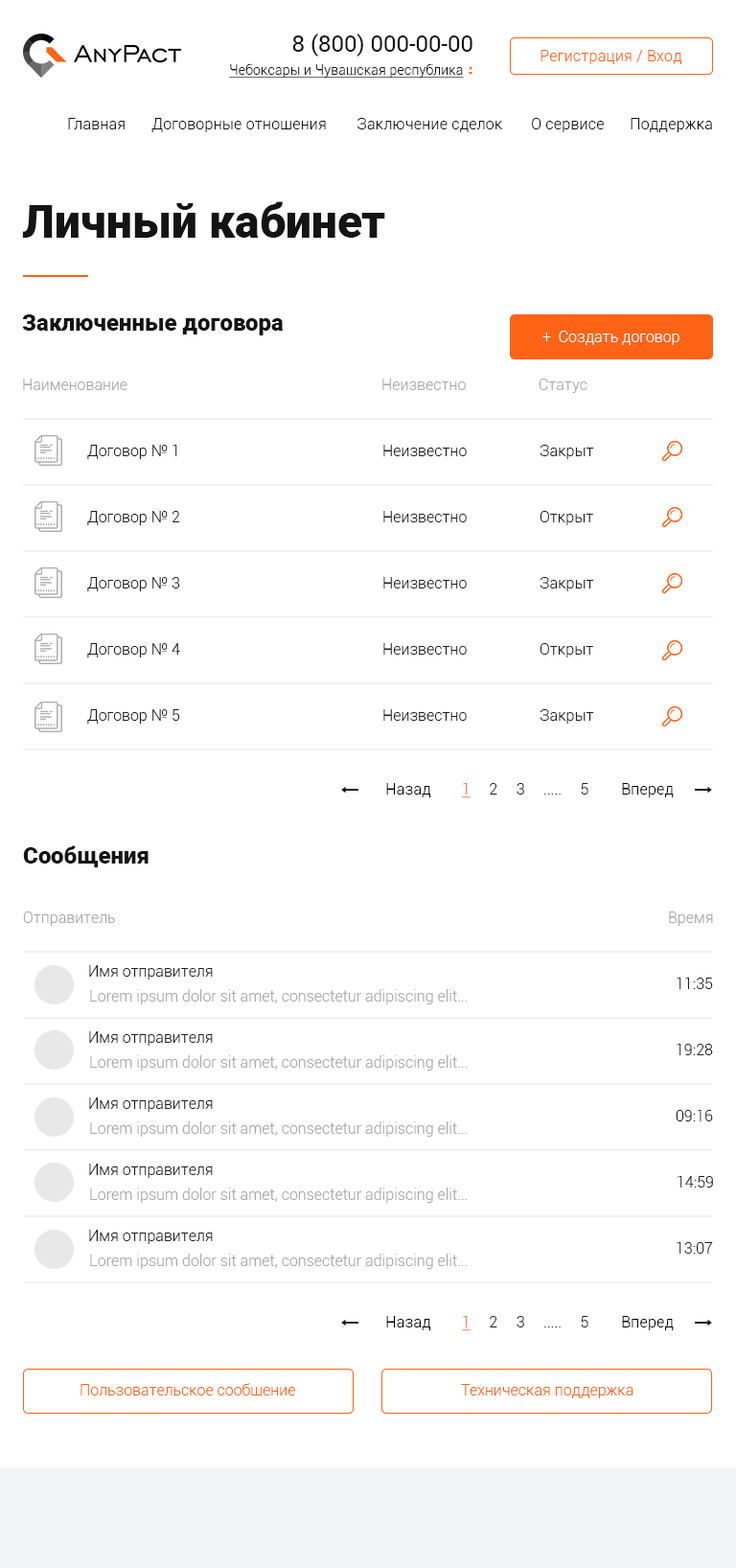
<style>
.page{position:relative;width:736px;height:1568px;background:#ffffff}
.page>*{position:absolute;margin:0}
.t1{font:23px "Roboto-Regular";color:#141414}
.t2{font:15.3px "Roboto-Light";letter-spacing:0.015em;color:#ff6416}
.t3{font:13.4px "Roboto-Light";letter-spacing:0.015em;color:#131313;text-decoration:underline}
.t4{font:15.3px "Roboto-Light";letter-spacing:0.015em;color:#141414}
.t5{font:15.3px "Roboto-Light";letter-spacing:0.015em;color:#131313}
.t6{font:46px "Roboto-Black";color:#141414}
.t7{font:23px "Roboto-Black";color:#141414}
.t8{font:15.3px "Roboto-Light";color:#ffffff}
.t9{font:15.3px "Roboto-Light";color:#a8a8a8}
.t10{font:15.3px "Roboto-Light";color:#1d1d1d}
.t11{font:15.3px "Roboto-Light";letter-spacing:0.015em;color:#000000}
.t12{font:15.3px "Roboto-Light";color:#ff6416;text-decoration:underline}
.t13{font:15.3px "Roboto-Light";color:#ff6416}
</style>
<div class="page">
<p class="t1" style="left:292px;top:34px;width:181px;height:23px">8 (800) 000-00-00</p>
<p class="t2" style="left:541px;top:50px;width:141px;height:14px">Регистрация / Вход</p>
<p class="t3" style="left:229px;top:64px;width:235px;height:14px">Чебоксары и Чувашская республика</p>
<p class="t4" style="left:68px;top:118px;width:57px;height:11px">Главная</p>
<p class="t5" style="left:151px;top:118px;width:175px;height:14px">Договорные отношения</p>
<p class="t5" style="left:357px;top:118px;width:146px;height:14px">Заключение сделок</p>
<p class="t5" style="left:532px;top:118px;width:72px;height:14px">О сервисе</p>
<p class="t5" style="left:631px;top:118px;width:81px;height:14px">Поддержка</p>
<p class="t6" style="left:22px;top:201px;width:363px;height:37px">Личный кабинет</p>
<p class="t7" style="left:22px;top:314px;width:262px;height:21px">Заключенные договора</p>
<p class="t8" style="left:542px;top:331px;width:138px;height:14px">+  Создать договор</p>
<p class="t9" style="left:23px;top:379px;width:104px;height:11px">Наименование</p>
<p class="t9" style="left:382px;top:379px;width:84px;height:11px">Неизвестно</p>
<p class="t9" style="left:539px;top:379px;width:49px;height:14px">Статус</p>
<p class="t10" style="left:87px;top:445px;width:90px;height:14px">Договор № 1</p>
<p class="t10" style="left:383px;top:445px;width:84px;height:11px">Неизвестно</p>
<p class="t10" style="left:540px;top:445px;width:54px;height:14px">Закрыт</p>
<p class="t10" style="left:87px;top:511px;width:93px;height:14px">Договор № 2</p>
<p class="t10" style="left:383px;top:511px;width:84px;height:11px">Неизвестно</p>
<p class="t10" style="left:540px;top:511px;width:53px;height:14px">Открыт</p>
<p class="t10" style="left:87px;top:577px;width:93px;height:14px">Договор № 3</p>
<p class="t10" style="left:383px;top:577px;width:84px;height:11px">Неизвестно</p>
<p class="t10" style="left:540px;top:577px;width:54px;height:14px">Закрыт</p>
<p class="t10" style="left:87px;top:643px;width:93px;height:14px">Договор № 4</p>
<p class="t10" style="left:383px;top:643px;width:84px;height:12px">Неизвестно</p>
<p class="t10" style="left:540px;top:643px;width:53px;height:14px">Открыт</p>
<p class="t10" style="left:87px;top:709px;width:93px;height:15px">Договор № 5</p>
<p class="t10" style="left:383px;top:709px;width:84px;height:12px">Неизвестно</p>
<p class="t10" style="left:540px;top:709px;width:54px;height:15px">Закрыт</p>
<p class="t11" style="left:386px;top:783px;width:45px;height:14px">Назад</p>
<p class="t10" style="left:462px;top:783px;width:126px;height:15px"><span class="t12">1</span>     2     3     .....     5</p>
<p class="t11" style="left:622px;top:783px;width:52px;height:14px">Вперед</p>
<p class="t7" style="left:23px;top:845px;width:126px;height:22px">Сообщения</p>
<p class="t9" style="left:23px;top:911px;width:92px;height:15px">Отправитель</p>
<p class="t9" style="left:669px;top:911px;width:44px;height:15px">Время</p>
<p class="t10" style="left:89px;top:965px;width:124px;height:15px">Имя отправителя</p>
<p class="t10" style="left:677px;top:978px;width:36px;height:11px">11:35</p>
<p class="t9" style="left:90px;top:989px;width:378px;height:15px">Lorem ipsum dolor sit amet, consectetur adipiscing elit...</p>
<p class="t10" style="left:89px;top:1031px;width:124px;height:15px">Имя отправителя</p>
<p class="t10" style="left:677px;top:1044px;width:36px;height:11px">19:28</p>
<p class="t9" style="left:90px;top:1055px;width:378px;height:16px">Lorem ipsum dolor sit amet, consectetur adipiscing elit...</p>
<p class="t10" style="left:89px;top:1097px;width:124px;height:15px">Имя отправителя</p>
<p class="t10" style="left:676px;top:1110px;width:37px;height:11px">09:16</p>
<p class="t9" style="left:90px;top:1121px;width:378px;height:16px">Lorem ipsum dolor sit amet, consectetur adipiscing elit...</p>
<p class="t10" style="left:89px;top:1164px;width:124px;height:14px">Имя отправителя</p>
<p class="t10" style="left:678px;top:1176px;width:35px;height:12px">14:59</p>
<p class="t9" style="left:90px;top:1188px;width:378px;height:15px">Lorem ipsum dolor sit amet, consectetur adipiscing elit...</p>
<p class="t10" style="left:89px;top:1230px;width:124px;height:14px">Имя отправителя</p>
<p class="t9" style="left:90px;top:1254px;width:378px;height:15px">Lorem ipsum dolor sit amet, consectetur adipiscing elit...</p>
<p class="t10" style="left:677px;top:1242px;width:36px;height:12px">13:07</p>
<p class="t11" style="left:386px;top:1316px;width:45px;height:14px">Назад</p>
<p class="t10" style="left:462px;top:1316px;width:126px;height:15px"><span class="t12">1</span>     2     3     .....     5</p>
<p class="t11" style="left:622px;top:1316px;width:52px;height:14px">Вперед</p>
<p class="t13" style="left:81px;top:1383px;width:214px;height:13px">Пользовательское сообщение</p>
<p class="t13" style="left:461px;top:1384px;width:173px;height:14px">Техническая поддержка</p>
</div>
